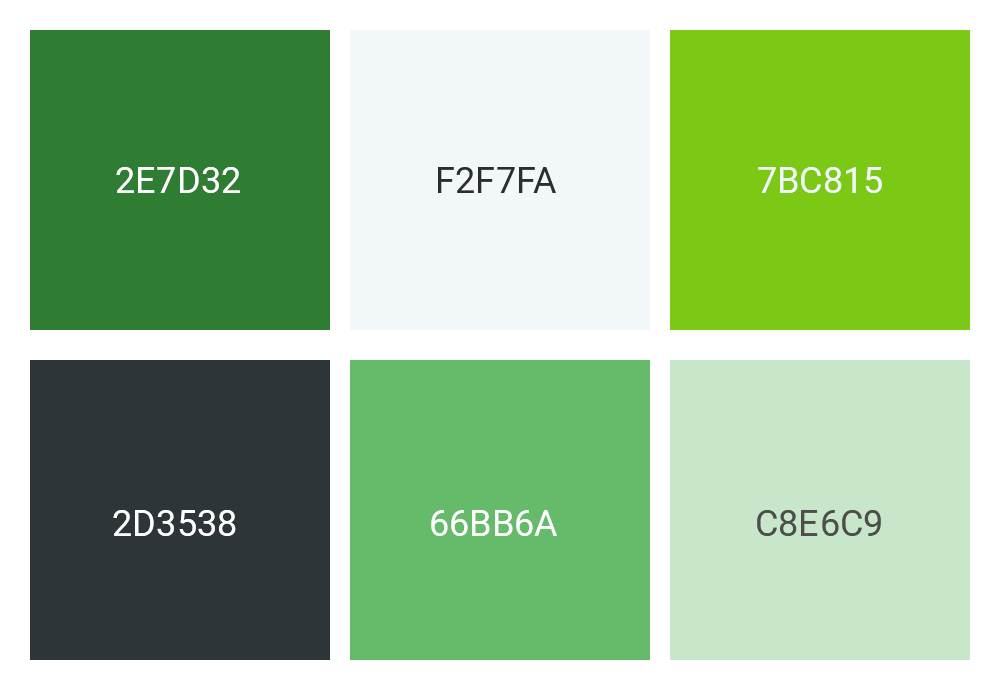
<style>
.page{position:relative;width:1000px;height:700px;background:#ffffff}
.page>*{position:absolute;margin:0}
.t1{font:36px "Roboto-Regular";letter-spacing:0.01em;color:#fefefe;text-transform:uppercase}
.t2{font:36px "Roboto-Regular";letter-spacing:0.01em;color:#2d2d2d;text-transform:uppercase}
.t3{font:36px "Roboto-Regular";letter-spacing:0.01em;color:#f2f7fa;text-transform:uppercase}
.t4{font:36px "Roboto-Regular";letter-spacing:0.01em;color:#4c4e4c;text-transform:uppercase}
</style>
<div class="page">
<p class="t1" style="left:116px;top:167px;width:124px;height:26px">2e7d32</p>
<p class="t2" style="left:438px;top:167px;width:118px;height:26px">f2f7fa</p>
<p class="t3" style="left:758px;top:167px;width:124px;height:26px">7bc815</p>
<p class="t1" style="left:113px;top:510px;width:123px;height:26px">2d3538</p>
<p class="t1" style="left:431px;top:510px;width:126px;height:26px">66bb6a</p>
<p class="t4" style="left:757px;top:510px;width:124px;height:26px">c8e6c9</p>
</div>
